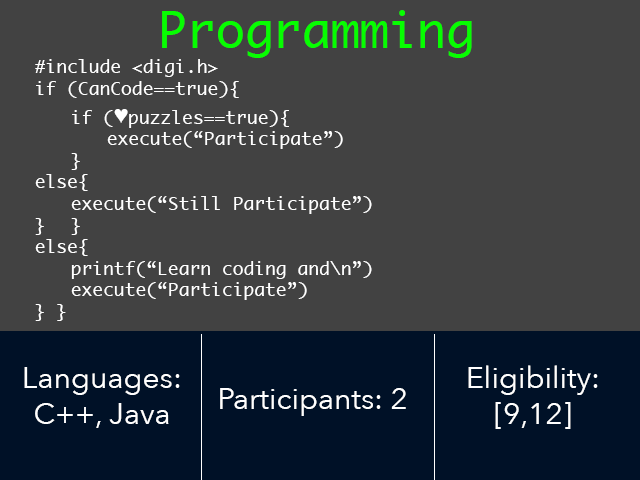
<style>
.page{position:relative;width:640px;height:480px;background:#424242}
.page>*{position:absolute;margin:0}
.t1{font:48px "Monaco";color:#06fe00}
.t2{font:18px "Monaco";color:#ffffff}
.t3{font:24px "TimesNewRomanPSMT";color:#ffffff}
.t4{font:30px "AvenirNext-Regular";color:#ffffff}
</style>
<div class="page">
<p class="t1" style="left:162px;top:10px;width:310px;height:48px">Programming</p>
<p class="t2" style="left:35px;top:59px;width:337px;height:262px">#include &lt;digi.h&gt;<br>if (CanCode==true){<br> if (<span class="t3">♥</span>puzzles==true){<br>  execute(“Participate”)<br> }<br>else{<br> execute(“Still Participate”)<br>} }<br>else{<br> printf(“Learn coding and\n”)<br> execute(“Participate”)<br>} }</p>
<p class="t4" style="left:468px;top:365px;width:130px;height:64px;text-align:center">Eligibility:<br>[9,12]</p>
<p class="t4" style="left:24px;top:367px;width:156px;height:61px;text-align:center">Languages:<br>C++, Java</p>
<p class="t4" style="left:220px;top:388px;width:186px;height:28px">Participants: 2</p>
</div>
